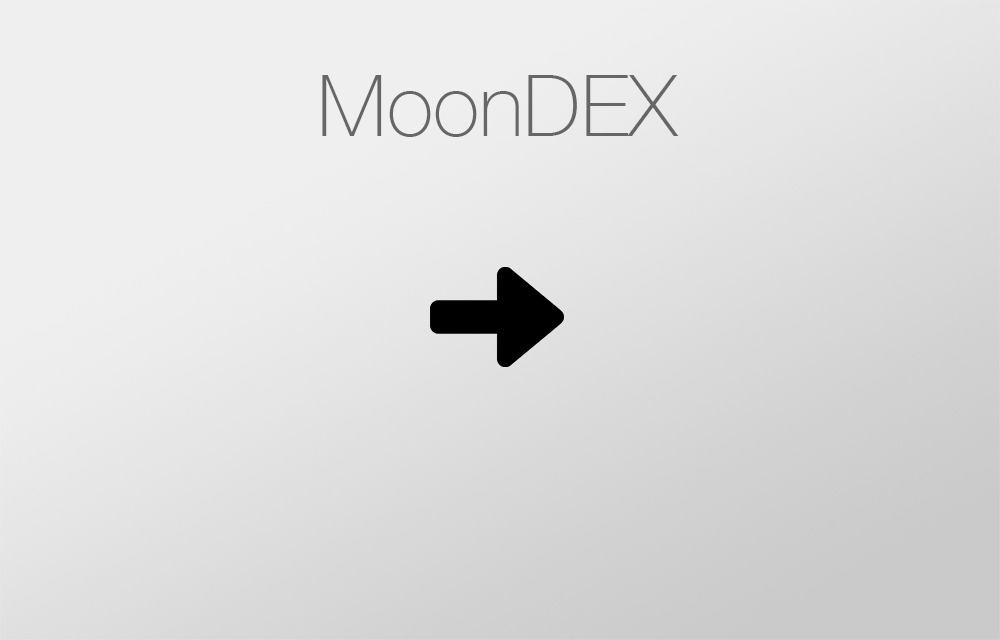
<style>
.page{position:relative;width:1000px;height:640px}
.page>*{position:absolute;margin:0}
.t1{font:85.7px "HelveticaNeue-Thin";color:#666666}
</style>
<div class="page">
<p class="t1" style="left:322px;top:75px;width:357px;height:62px">MoonDEX</p>
</div>
